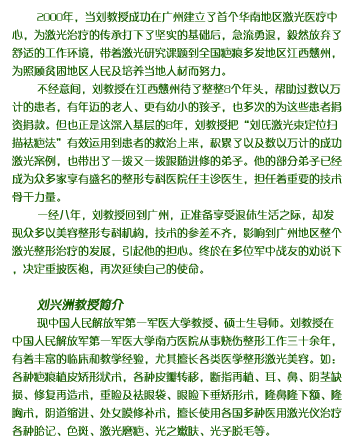
<style>
.page{position:relative;width:357px;height:447px;background:#ffffff}
.page>*{position:absolute;margin:0}
.t1{font:11px/18px "FZZQJW--GB1-0";color:#196003}
.t2{font:12px/18px "FZZQJW--GB1-0";color:#196003;font-weight:bold;font-style:italic}
</style>
<div class="page">
<p class="t1" style="left:12px;top:11px;width:330px;height:426px">2000年，当刘教授成功在广州建立了首个华南地区激光医疗中心，为激光治疗的传承打下了坚实的基础后，急流勇退，毅然放弃了舒适的工作环境，带着激光研究课题到全国疤痕多发地区江西戆州，为照顾贫困地区人民及培养当地人材而努力。<br>        不经意间，刘教授在江西戆州待了整整8个年头，帮助过数以万计的患者，有年迈的老人、更有幼小的孩子，也多次的为这些患者捐资捐款。但也正是这深入基层的8年，刘教授把“刘氏激光束定位扫描祛疤法”有效运用到患者的救治上来，积累了以及数以万计的成功激光案例，也带出了一拨又一拨跟随进修的弟子。他的部分弟子已经成为众多家享有盛名的整形专科医院任主诊医生，担任着重要的技术骨干力量。<br>        一经八年，刘教授回到广州，正准备享受退休生活之际，却发现众多以美容整形专科机构，技术的参差不齐，影响到广州地区整个激光整形治疗的发展，引起他的担心。终於在多位军中战友的劝说下，决定重披医袍，再次延续自己的使命。<br><br>        <span class="t2">刘兴洲教授简介<br></span>        现中国人民解放军第一军医大学教授、硕士生导师。刘教授在中国人民解放军第一军医大学南方医院从事烧伤整形工作三十余年，有着丰富的临床和教学经验，尤其擅长各类医学整形激光美容。如：各种疤痕植皮矫形状术，各种皮瓣转移，断指再植、耳、鼻、阴茎缺损、修复再造术，重睑及祛眼袋、眼睑下垂矫形术，隆鼻隆下额、隆胸术，阴道缩进、处女膜修补术，擅长使用各国多种医用激光仪治疗各种胎记、色斑、激光磨疤、光之嫩肤、光子脱毛等。</p>
</div>
